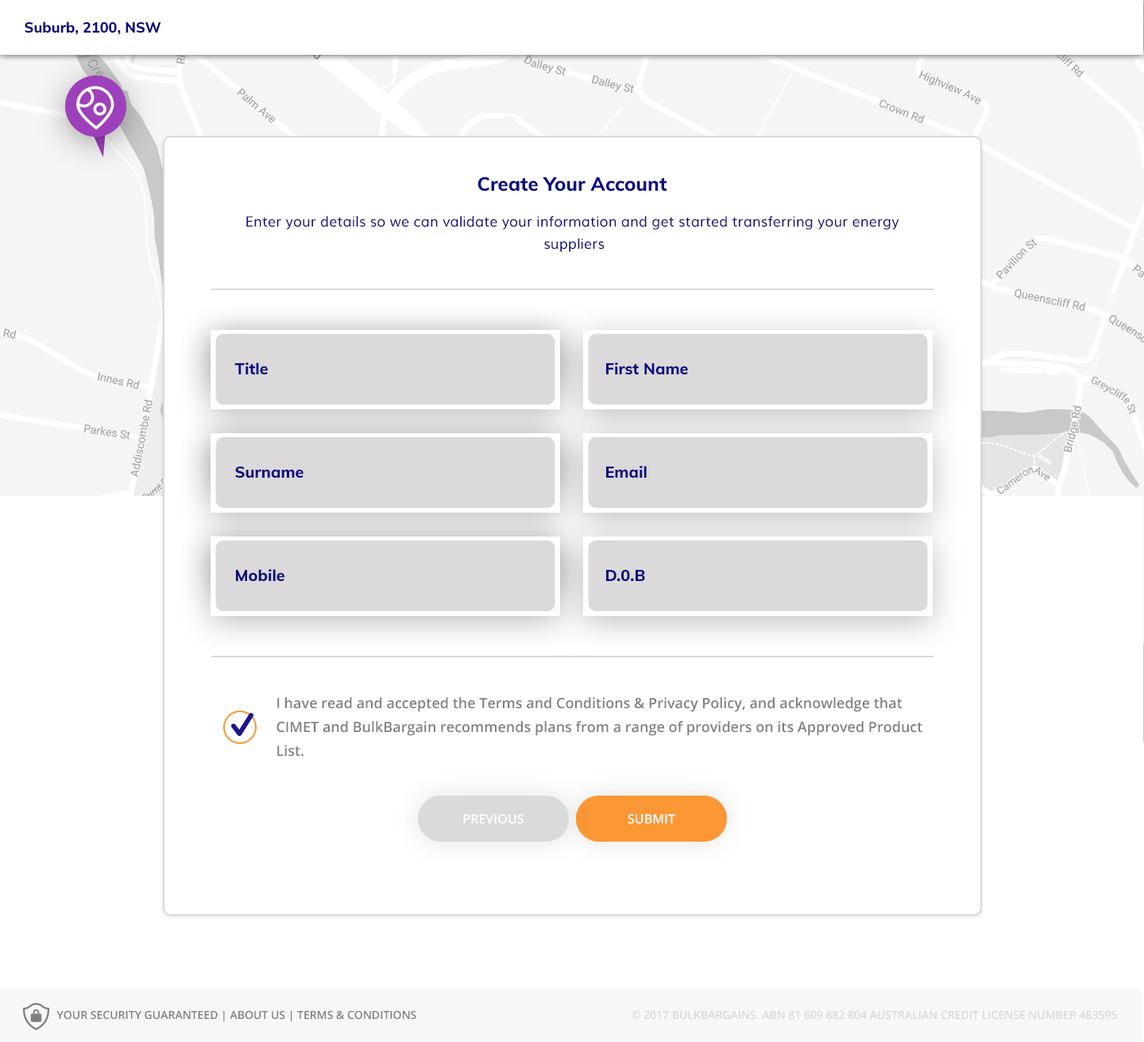
<style>
.page{position:relative;width:1144px;height:1042px;background:#ffffff}
.page>*{position:absolute;margin:0}
.t1{font:14.3px "Muli-ExtraBold";color:#0a0d80}
.t2{font:19.1px "Muli-ExtraBold";color:#0a0d80}
.t3{font:14.3px "Muli";color:#0a0d80}
.t4{font:15.8px "Muli-ExtraBold";color:#0a0d80}
.t5{font:14.3px/19.1px "OpenSans-Semibold";color:#807f7f}
.t6{font:12.8px "OpenSans-Semibold";color:#ffffff;text-transform:uppercase}
.t7{font:11.1px "OpenSans-Semibold";color:#807f7f;text-transform:uppercase}
.t8{font:11.1px "OpenSans-Semibold";color:#dbd9d9;text-transform:uppercase}
</style>
<div class="page">
<p class="t1" style="left:25px;top:21px;width:136px;height:14px">Suburb, 2100, NSW</p>
<p class="t2" style="left:478px;top:176px;width:189px;height:16px">Create Your Account</p>
<p class="t3" style="left:246px;top:216px;width:654px;height:36px;text-align:center">Enter your details so we can validate your information and get started transferring your energy <br>suppliers</p>
<p class="t4" style="left:234px;top:362px;width:34px;height:13px">Title</p>
<p class="t4" style="left:606px;top:362px;width:82px;height:13px">First Name</p>
<p class="t4" style="left:235px;top:466px;width:69px;height:12px">Surname</p>
<p class="t4" style="left:606px;top:466px;width:41px;height:12px">Email</p>
<p class="t4" style="left:236px;top:569px;width:49px;height:13px">Mobile</p>
<p class="t4" style="left:606px;top:569px;width:39px;height:13px">D.0.B</p>
<p class="t5" style="left:277px;top:697px;width:646px;height:60px">I have read and accepted the Terms and Conditions &amp; Privacy Policy, and acknowledge that <br>CIMET and BulkBargain recommends plans from a range of providers on its Approved Product <br>List.</p>
<p class="t6" style="left:463px;top:814px;width:61px;height:10px">Previous</p>
<p class="t6" style="left:628px;top:814px;width:48px;height:10px">submit</p>
<p class="t7" style="left:56px;top:1010px;width:360px;height:12px">Your security guaranteed | about us | Terms &amp; Conditions</p>
<p class="t8" style="left:632px;top:1010px;width:485px;height:10px">© 2017 Bulkbargains. ABN 81 609 882 804 Australian Credit License Number 483595</p>
</div>
